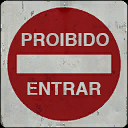
<style>
.page{position:relative;width:128px;height:128px}
.page>*{position:absolute;margin:0}
.t1{font:18px "Helvetica-Bold";color:#c0ccc8;text-transform:uppercase}
.t2{font:18px "Helvetica-Bold";letter-spacing:0.003em;color:#c0ccc8;text-transform:uppercase}
</style>
<div class="page">
<p class="t1" style="left:21px;top:33px;width:88px;height:13px">proibido</p>
<p class="t2" style="left:27px;top:82px;width:74px;height:13px">entrar</p>
</div>
